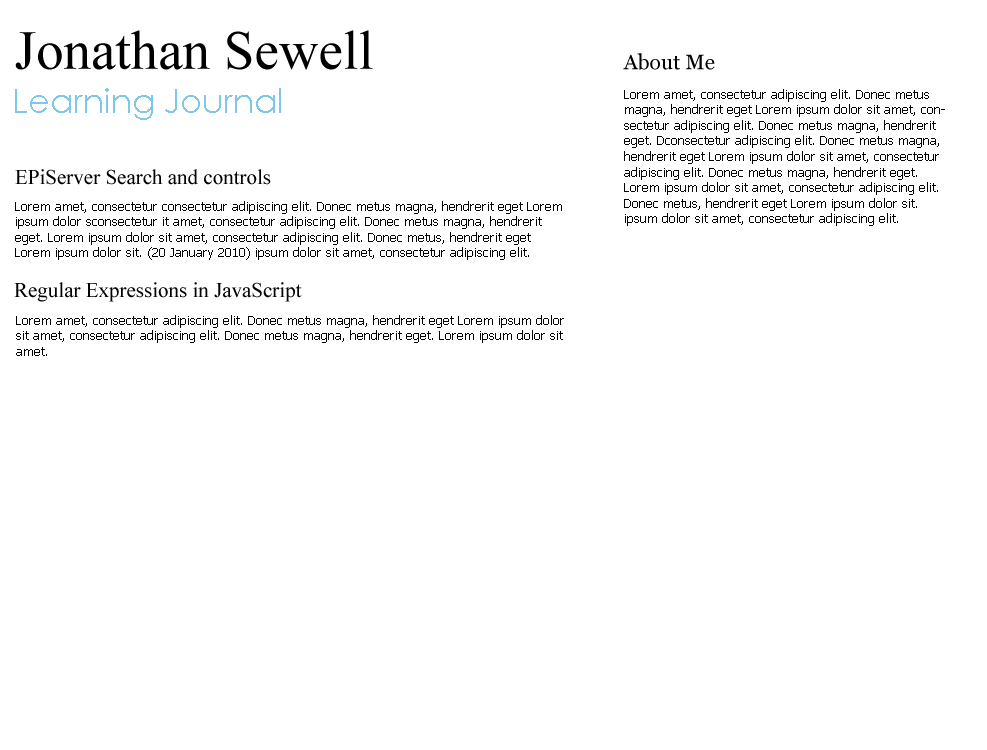
<style>
.page{position:relative;width:987px;height:750px;background:#ffffff}
.page>*{position:absolute;margin:0}
.t1{font:55px "TimesNewRomanPSMT";color:#000000}
.t2{font:21px "Georgia";color:#010101}
.t3{font:34px "CenturyGothic";color:#80c8e5}
.t4{font:13px "Tahoma";color:#000000}
.t5{font:21px "TimesNewRomanPSMT";color:#000000}
</style>
<div class="page">
<p class="t1" style="left:15px;top:30px;width:358px;height:40px">Jonathan Sewell</p>
<p class="t2" style="left:623px;top:53px;width:92px;height:17px">About Me</p>
<p class="t3" style="left:15px;top:88px;width:266px;height:32px">Learning Journal</p>
<p class="t4" style="left:624px;top:89px;width:321px;height:137px">Lorem amet, consectetur adipiscing elit. Donec metus magna, hendrerit eget Lorem ipsum dolor sit amet, consectetur adipiscing elit. Donec metus magna, hendrerit eget. Dconsectetur adipiscing elit. Donec metus magna, hendrerit eget Lorem ipsum dolor sit amet, consectetur adipiscing elit. Donec metus magna, hendrerit eget. <br>Lorem ipsum dolor sit amet, consectetur adipiscing elit. Donec metus, hendrerit eget Lorem ipsum dolor sit.<br>ipsum dolor sit amet, consectetur adipiscing elit.</p>
<p class="t5" style="left:15px;top:169px;width:256px;height:16px">EPiServer Search and controls</p>
<p class="t4" style="left:15px;top:201px;width:547px;height:59px">Lorem amet, consectetur consectetur adipiscing elit. Donec metus magna, hendrerit eget Lorem ipsum dolor sconsectetur it amet, consectetur adipiscing elit. Donec metus magna, hendrerit eget. Lorem ipsum dolor sit amet, consectetur adipiscing elit. Donec metus, hendrerit eget Lorem ipsum dolor sit. (20 January 2010) ipsum dolor sit amet, consectetur adipiscing elit.</p>
<p class="t5" style="left:14px;top:282px;width:288px;height:20px">Regular Expressions in JavaScript</p>
<p class="t4" style="left:16px;top:315px;width:548px;height:41px">Lorem amet, consectetur adipiscing elit. Donec metus magna, hendrerit eget Lorem ipsum dolor sit amet, consectetur adipiscing elit. Donec metus magna, hendrerit eget. Lorem ipsum dolor sit amet.</p>
</div>
